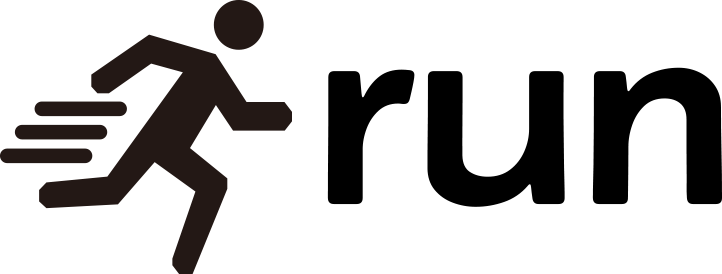
<style>
.page{position:relative;width:722px;height:274px;background:#ffffff}
.page>*{position:absolute;margin:0}
.t1{font:300px "Belanosima-Regular";color:#000000}
</style>
<div class="page">
<p class="t1" style="left:327px;top:67px;width:395px;height:140px">run</p>
</div>
